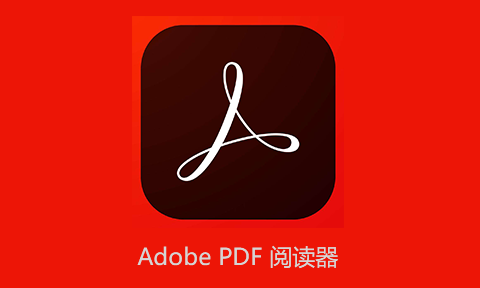
<style>
.page{position:relative;width:480px;height:288px;background:#ed1506}
.page>*{position:absolute;margin:0}
.t1{font:23px "MicrosoftYaHei";color:#d5d5d5}
</style>
<div class="page">
<p class="t1" style="left:137px;top:245px;width:201px;height:24px">Adobe PDF 阅读器</p>
</div>
